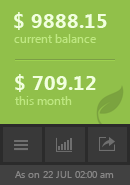
<style>
.page{position:relative;width:130px;height:185px;background:#91c04a}
.page>*{position:absolute;margin:0}
.t1{font:20px "SegoeUI-Bold";color:#f1ffdd}
.t2{font:12px "SegoeUI";color:#bfe881}
.t3{font:10px "SegoeUI";color:#878686}
</style>
<div class="page">
<p class="t1" style="left:14px;top:12px;width:93px;height:18px">$ 9888.15</p>
<p class="t2" style="left:14px;top:34px;width:82px;height:9px">current balance</p>
<p class="t1" style="left:15px;top:74px;width:81px;height:18px">$ 709.12</p>
<p class="t2" style="left:15px;top:96px;width:57px;height:9px">this month</p>
<p class="t3" style="left:15px;top:171px;width:99px;height:7px">As on 22 JUL 02:00 am</p>
</div>
